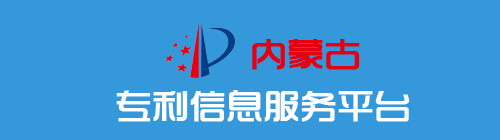
<style>
.page{position:relative;width:500px;height:140px;background:#3498db}
.page>*{position:absolute;margin:0}
.t1{font:36px "TRENDS";color:#e70012;font-weight:bold}
.t2{font:36px "TRENDS";color:#ffffff;font-weight:bold}
</style>
<div class="page">
<p class="t1" style="left:252px;top:39px;width:108px;height:31px">内蒙古</p>
<p class="t2" style="left:116px;top:90px;width:294px;height:32px">专利信息服务平台</p>
</div>
